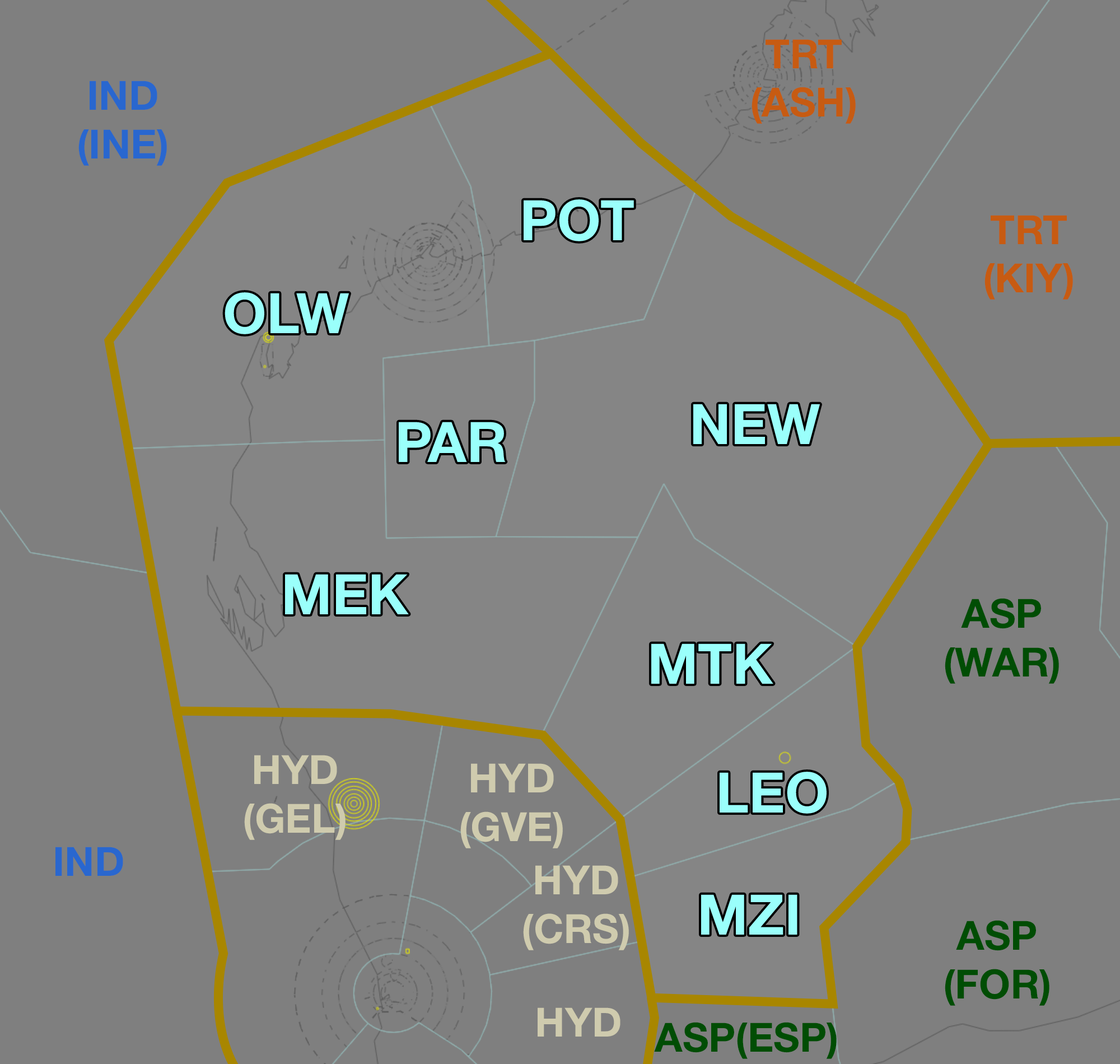
<style>
.page{position:relative;width:1120px;height:1064px;background:#7f7f7f}
.page>*{position:absolute;margin:0}
.t1{font:40.3px "HelveticaNeue-Bold";color:#c75b12}
.t2{font:40.3px "HelveticaNeue-Bold";color:#2967cf}
.t3{font:56px "HelveticaNeue-Bold";color:#9afffb}
.t4{font:40.3px "HelveticaNeue-Bold";color:#004d04}
.t5{font:40.3px "HelveticaNeue-Bold";color:#cfcbae}
</style>
<div class="page">
<p class="t1" style="left:752px;top:39px;width:104px;height:85px;text-align:center">TRT<br>(ASH)</p>
<p class="t2" style="left:78px;top:81px;width:89px;height:85px;text-align:center">IND<br>(INE)</p>
<p class="t3" style="left:524px;top:199px;width:110px;height:42px">POT</p>
<p class="t1" style="left:985px;top:215px;width:88px;height:85px;text-align:center">TRT<br>(KIY)</p>
<p class="t3" style="left:225px;top:292px;width:124px;height:42px">OLW</p>
<p class="t3" style="left:693px;top:404px;width:127px;height:40px">NEW</p>
<p class="t3" style="left:399px;top:422px;width:107px;height:40px">PAR</p>
<p class="t3" style="left:285px;top:574px;width:124px;height:41px">MEK</p>
<p class="t4" style="left:945px;top:598px;width:114px;height:86px;text-align:center">ASP<br>(WAR)</p>
<p class="t3" style="left:651px;top:644px;width:123px;height:40px">MTK</p>
<p class="t5" style="left:244px;top:755px;width:102px;height:85px;text-align:center">HYD<br>(GEL)</p>
<p class="t5" style="left:460px;top:764px;width:103px;height:85px;text-align:center">HYD<br>(GVE)</p>
<p class="t3" style="left:720px;top:772px;width:107px;height:42px">LEO</p>
<p class="t2" style="left:55px;top:847px;width:68px;height:29px">IND</p>
<p class="t5" style="left:523px;top:865px;width:106px;height:86px;text-align:center">HYD<br>(CRS)</p>
<p class="t3" style="left:701px;top:895px;width:97px;height:40px">MZI</p>
<p class="t4" style="left:945px;top:920px;width:105px;height:86px;text-align:center">ASP<br>(FOR)</p>
<p class="t5" style="left:538px;top:1008px;width:83px;height:29px">HYD</p>
<p class="t4" style="left:654px;top:1022px;width:183px;height:37px">ASP(ESP)</p>
</div>
